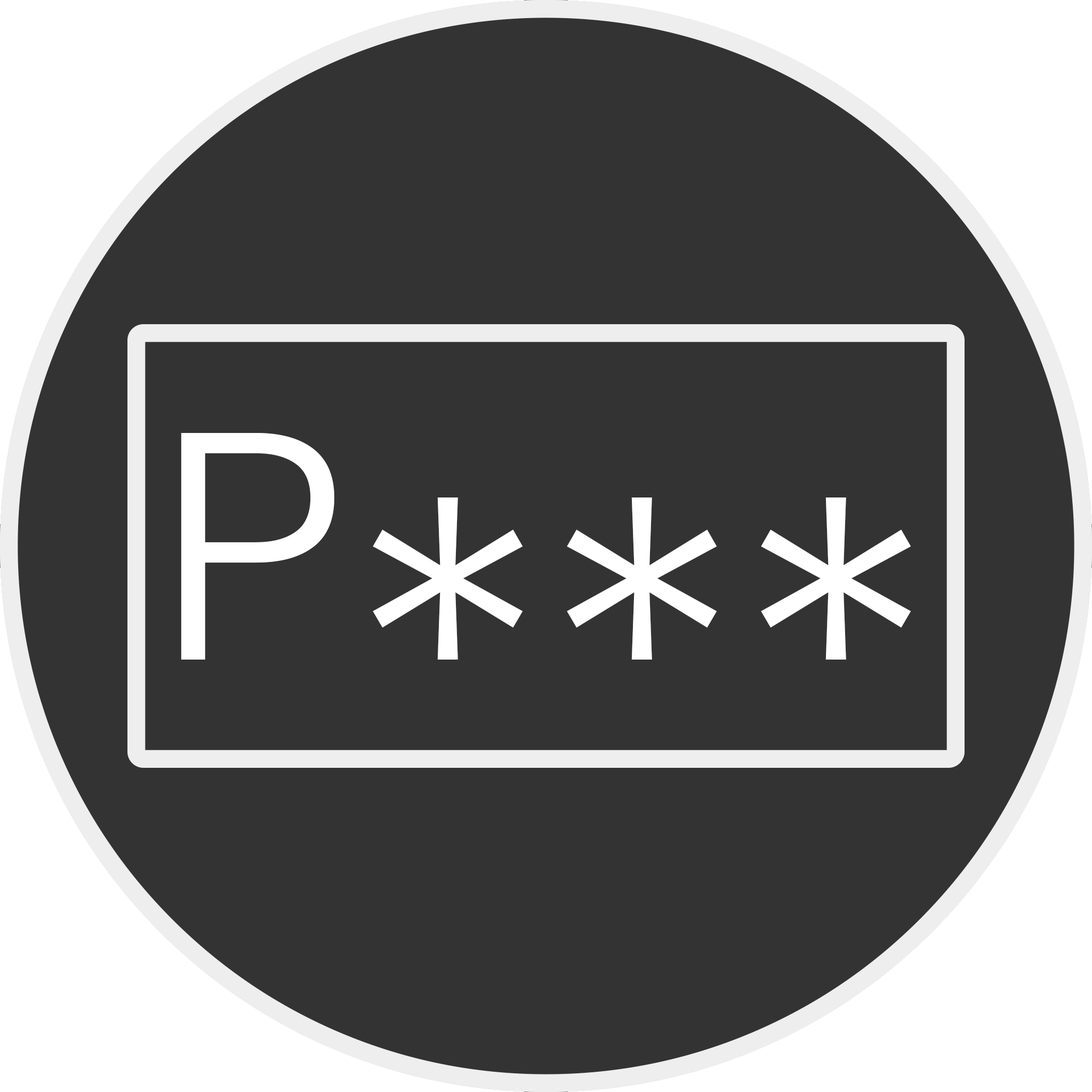
<style>
.page{position:relative;width:1092px;height:1092px;background:#333333}
.page>*{position:absolute;margin:0}
.t1{font:355.5px "AnonymousPro";color:#ffffff}
</style>
<div class="page">
<p class="t1" style="left:181px;top:433px;width:730px;height:227px">P***</p>
</div>
